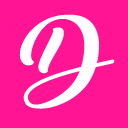
<style>
.page{position:relative;width:128px;height:128px;background:#ff1493}
.page>*{position:absolute;margin:0}
.t1{font:77px "BacktoBlackDemo";color:#ffffff;font-weight:bold;scale:1.06 1}
</style>
<div class="page">
<p class="t1" style="left:19px;top:14px;width:96px;height:95px">D</p>
</div>
